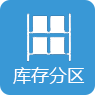
<style>
.page{position:relative;width:95px;height:95px;background:#3998d6}
.page>*{position:absolute;margin:0}
.t1{font:18px "MicrosoftYaHei";color:#ffffff}
</style>
<div class="page">
<p class="t1" style="left:13px;top:67px;width:72px;height:17px">库存分区</p>
</div>
